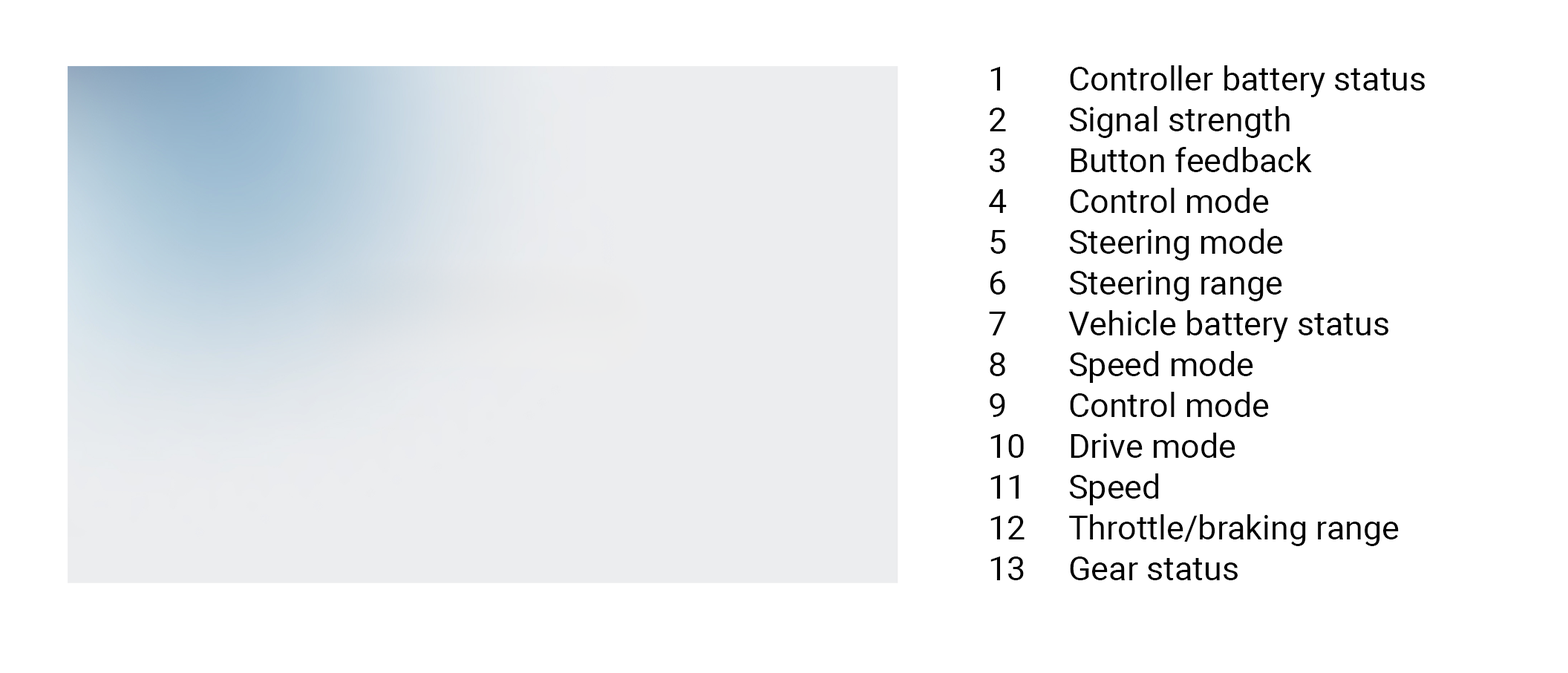
<style>
.page{position:relative;width:1568px;height:673px;background:#ffffff}
.page>*{position:absolute;margin:0}
.t1{font:33.4px/40.8px "Roboto-Regular";color:#000000}
</style>
<div class="page">
<p class="t1" style="left:989px;top:65px;width:436px;height:516px">1   Controller battery status<br>2   Signal strength<br>3   Button feedback<br>4   Control mode<br>5   Steering mode<br>6   Steering range<br>7   Vehicle battery status<br>8   Speed mode<br>9   Control mode<br>10  Drive mode<br>11  Speed<br>12  Throttle/braking range<br>13  Gear status</p>
</div>
